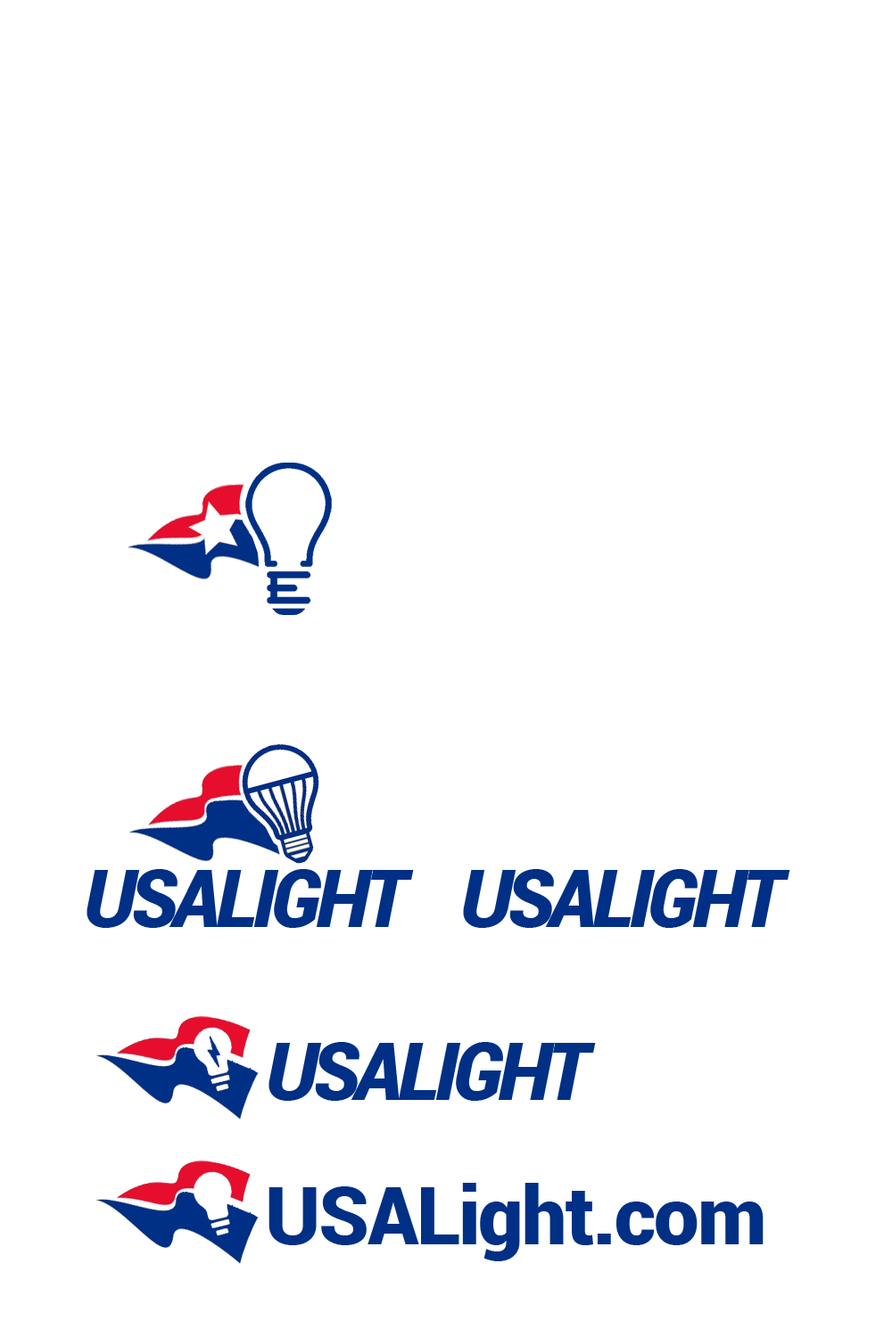
<style>
.page{position:relative;width:892px;height:1337px;background:#ffffff}
.page>*{position:absolute;margin:0}
.t1{font:138.4px "Roboto-BlackItalic";letter-spacing:-0.06em;color:#003085}
.t2{font:138.4px "Roboto-Black";letter-spacing:-0.025em;color:#003085}
</style>
<div class="page">
<p class="t1" style="left:86px;top:869px;width:328px;height:59px">USALIGHT</p>
<p class="t1" style="left:463px;top:869px;width:327px;height:59px">USALIGHT</p>
<p class="t1" style="left:268px;top:1042px;width:328px;height:59px">USALIGHT</p>
<p class="t2" style="left:268px;top:1183px;width:495px;height:79px">USALight.com</p>
</div>
